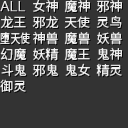
<style>
.page{position:relative;width:128px;height:128px;background:#333333}
.page>*{position:absolute;margin:0}
.t1{font:13px/16px "SourceHanSansSC-Regular";color:#eaeaea}
.t2{font:13px/16px "SourceHanSansSC-Regular";color:#ffffff}
.t3{font:13px/16px "SourceHanSansSC-Regular";color:#e9e9e9}
.t4{font:13px/16px "SourceHanSansSC-Regular";color:#e9e9e9;scale:0.76 1}
</style>
<div class="page">
<p class="t1" style="left:32px;top:0px;width:27px;height:77px">女神<br>邪龙<br>神兽<br>妖精<br>邪鬼</p>
<p class="t2" style="left:64px;top:0px;width:26px;height:76px">魔神<br>天使<br>魔兽<br>魔王<br>鬼女</p>
<p class="t1" style="left:96px;top:0px;width:26px;height:77px">邪神<br>灵鸟<br>妖兽<br>鬼神<br>精灵</p>
<p class="t3" style="left:0px;top:15px;width:30px;height:77px">龙王<br><span class="t4">堕天使<br></span>幻魔<br>斗鬼<br>御灵</p>
</div>
